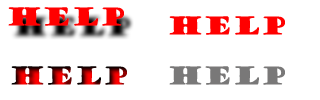
<style>
.page{position:relative;width:320px;height:100px;background:#ffffff}
.page>*{position:absolute;margin:0}
.t1{font:24px "GoudyStout";color:#ff0000}
.t2{font:24px "GoudyStout"}
</style>
<div class="page">
<p class="t1" style="left:8px;top:7px;width:116px;height:19px">HELP</p>
<p class="t1" style="left:169px;top:16px;width:116px;height:19px">HELP</p>
<p class="t2" style="left:11px;top:66px;width:116px;height:19px">HELP</p>
</div>
